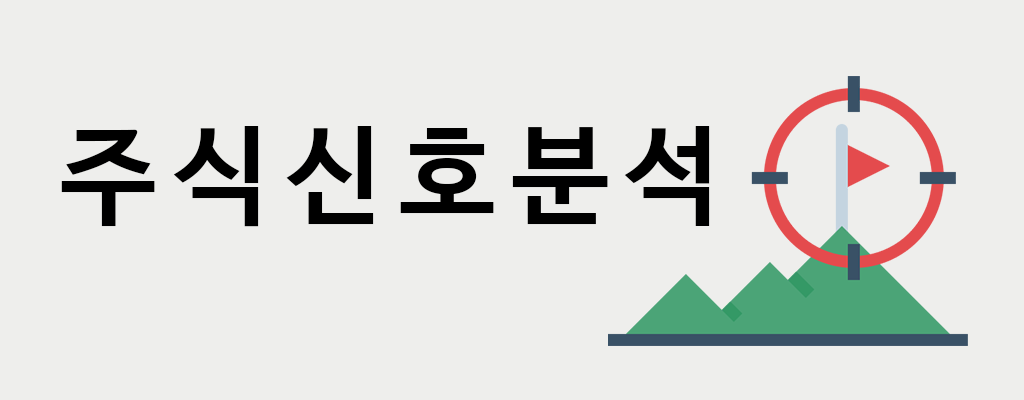
<style>
.page{position:relative;width:1024px;height:400px;background:#eeeeec}
.page>*{position:absolute;margin:0}
.t1{font:108.2px "NanumBarunGothicBold";letter-spacing:0.15em;color:#000000}
</style>
<div class="page">
<p class="t1" style="left:61px;top:126px;width:649px;height:101px">주식신호분석</p>
</div>
